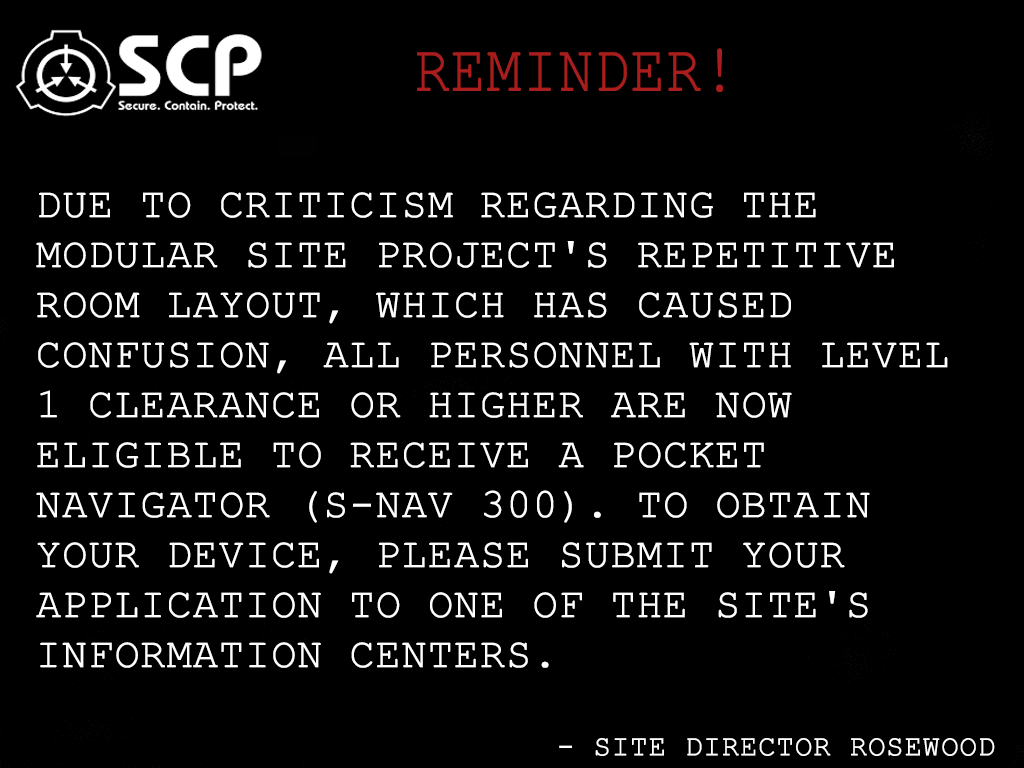
<style>
.page{position:relative;width:1024px;height:768px;background:#000000}
.page>*{position:absolute;margin:0}
.t1{font:66.7px "CourierNewPSMT";color:#aa1d1d;text-transform:uppercase;font-weight:bold;scale:0.86 1}
.t2{font:41.7px "CourierNewPSMT";color:#ffffff;text-transform:uppercase;font-weight:bold}
.t3{font:29.2px "CourierNewPSMT";color:#ffffff;text-transform:uppercase;font-weight:bold}
</style>
<div class="page">
<p class="t1" style="left:417px;top:48px;width:306px;height:44px">Reminder!</p>
<p class="t2" style="left:36px;top:192px;width:912px;height:476px;text-align:justify">Due to criticism regarding the Modular Site Project's repetitive room layout, which has caused confusion, all personnel with Level 1 clearance or higher are now eligible to receive a pocket navigator (S-NAV 300). To obtain your device, please submit your application to one of the site's information centers.</p>
<p class="t3" style="left:559px;top:738px;width:436px;height:18px">- Site Director Rosewood</p>
</div>
